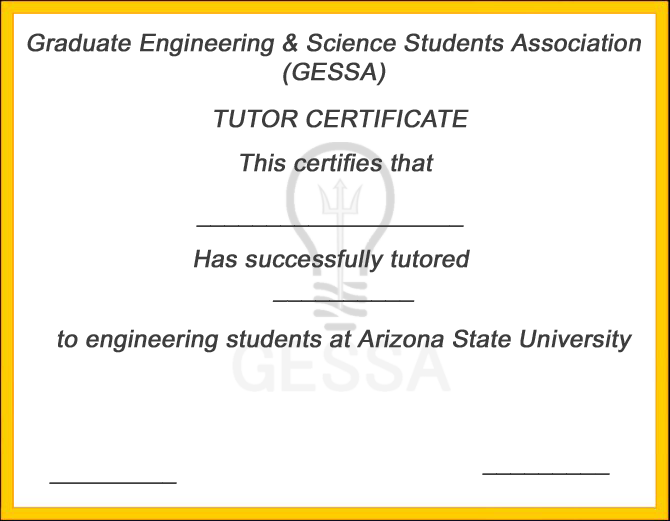
<style>
.page{position:relative;width:670px;height:521px;background:#ffffff}
.page>*{position:absolute;margin:0}
.t1{font:24px "ArialMT";color:#3d3d3d;font-weight:bold;font-style:italic}
</style>
<div class="page">
<p class="t1" style="left:27px;top:33px;width:614px;height:53px;text-align:center">Graduate Engineering &amp; Science Students Association<br>(GESSA)</p>
<p class="t1" style="left:214px;top:109px;width:255px;height:19px">TUTOR CERTIFICATE</p>
<p class="t1" style="left:240px;top:153px;width:194px;height:19px">This certifies that</p>
<p class="t1" style="left:196px;top:225px;width:268px;height:2px">___________________</p>
<p class="t1" style="left:194px;top:249px;width:276px;height:24px">Has successfully tutored</p>
<p class="t1" style="left:272px;top:300px;width:143px;height:2px">__________</p>
<p class="t1" style="left:57px;top:329px;width:576px;height:24px">to engineering students at Arizona State University</p>
<p class="t1" style="left:482px;top:473px;width:128px;height:2px">_________</p>
<p class="t1" style="left:49px;top:482px;width:128px;height:2px">_________</p>
</div>
